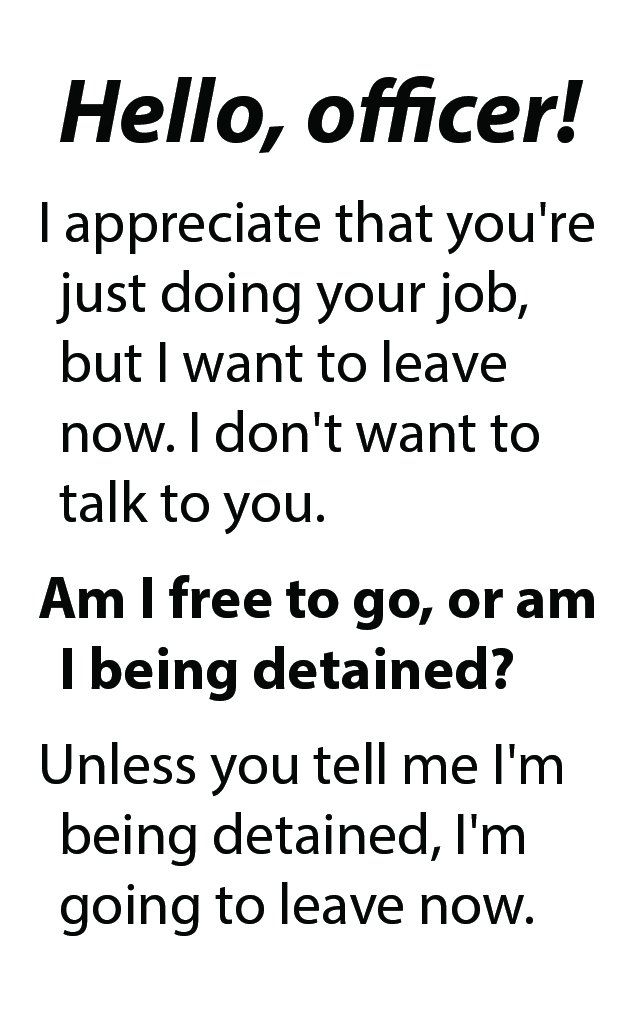
<style>
.page{position:relative;width:638px;height:1011px;background:#ffffff}
.page>*{position:absolute;margin:0}
.t1{font:58.3px "MyriadPro-Regular";color:#060808}
.t2{font:92.1px "MyriadPro-BoldIt";color:#060808}
.t3{font:59.2px "MyriadPro-Bold";color:#060808}
</style>
<div class="page">
<p class="t1" style="left:39px;top:76px;width:555px;height:860px;text-align:center"><span class="t2">Hello, officer!<br></span>I appreciate that you're just doing your job, but I want to leave now. I don't want to talk to you.<br><span class="t3">Am I free to go, or am I being detained?<br></span>Unless you tell me I'm being detained, I'm going to leave now.</p>
</div>
